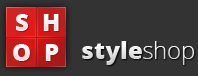
<style>
.page{position:relative;width:198px;height:76px;background:#333333}
.page>*{position:absolute;margin:0}
.t1{font:24px "OpenSans-Extrabold";color:#ffffff}
.t2{font:24px "OpenSans-Extrabold";color:#e8e8e8}
.t3{font:24px "OpenSans-Light";color:#e8e8e8}
</style>
<div class="page">
<p class="t1" style="left:16px;top:14px;width:12px;height:17px">S</p>
<p class="t1" style="left:43px;top:14px;width:16px;height:17px">H</p>
<p class="t2" style="left:82px;top:41px;width:112px;height:24px">style<span class="t3">shop</span></p>
<p class="t1" style="left:13px;top:44px;width:17px;height:17px">O</p>
<p class="t1" style="left:45px;top:44px;width:14px;height:17px">P</p>
</div>
